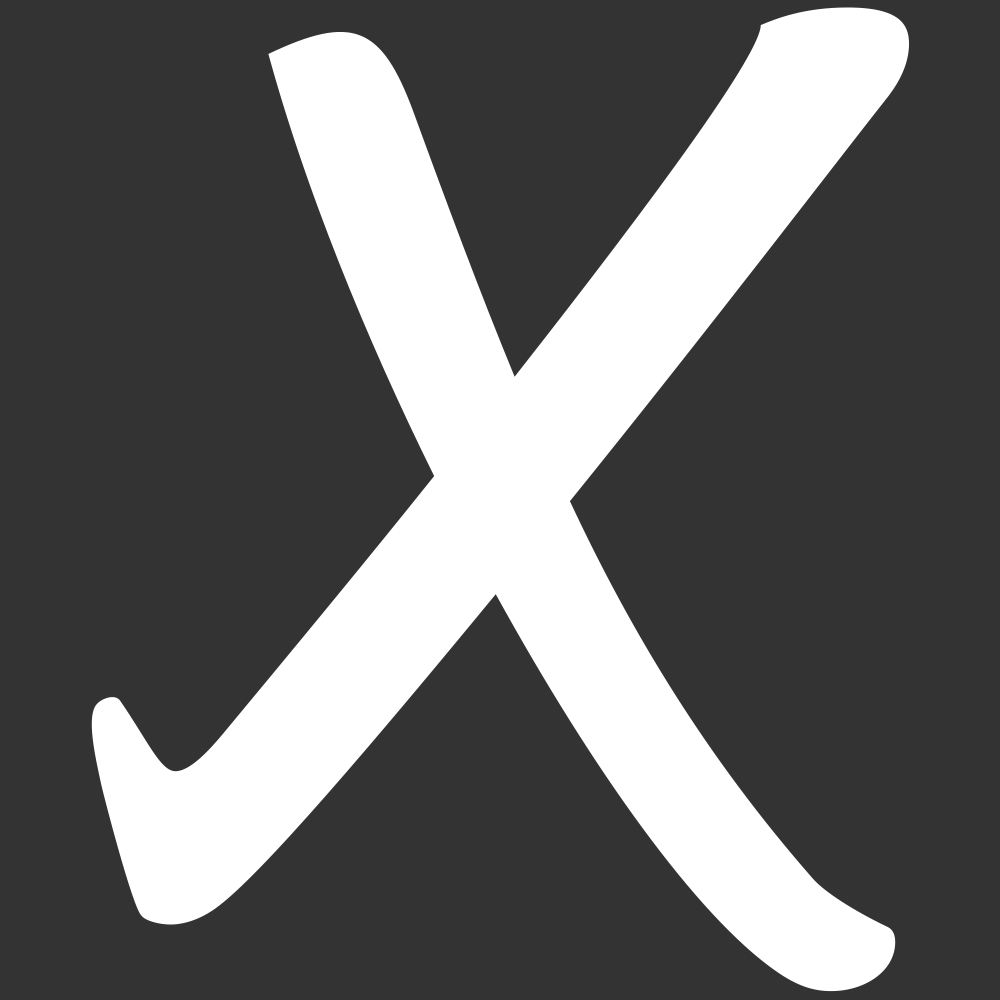
<style>
.page{position:relative;width:1000px;height:1000px;background:#333333}
.page>*{position:absolute;margin:0}
.t1{font:1256.2px "Feltro-Normal";color:#ffffff}
</style>
<div class="page">
<p class="t1" style="left:91px;top:7px;width:818px;height:985px">X</p>
</div>
